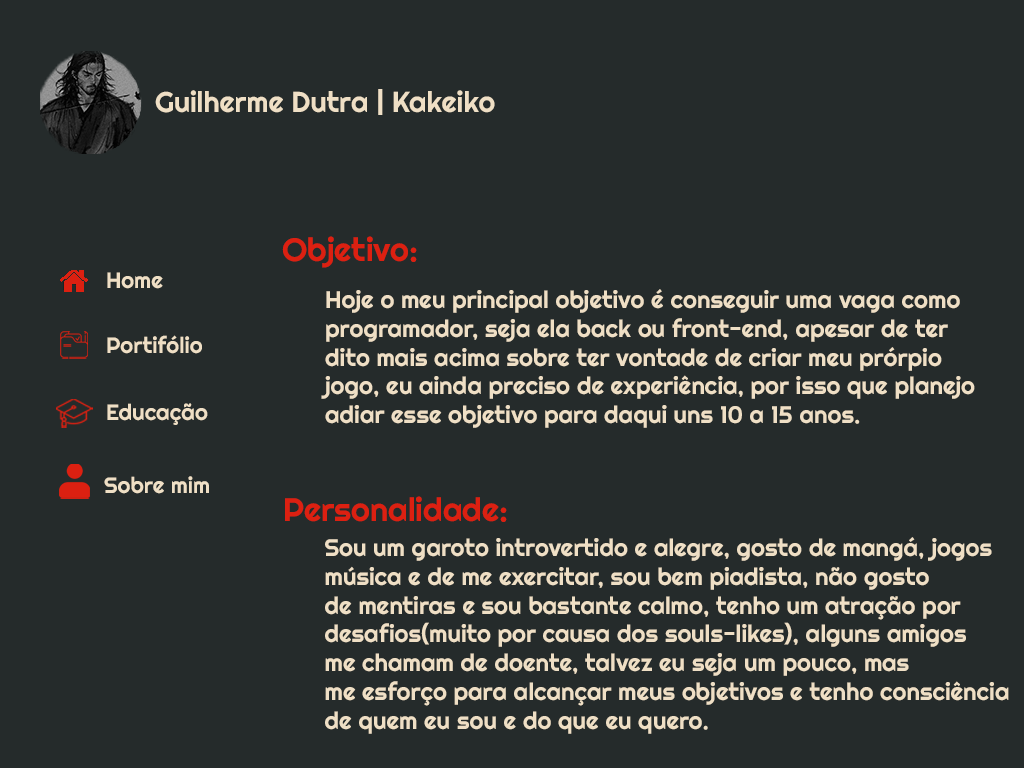
<style>
.page{position:relative;width:1024px;height:768px;background:#252b2b}
.page>*{position:absolute;margin:0}
.t1{font:28.7px "Righteous-Regular";color:#efdfc5}
.t2{font:32.4px "Righteous-Regular";color:#dc2011}
.t3{font:22.3px "Righteous-Regular";color:#efdfc5}
.t4{font:24px "Righteous-Regular";color:#efdfc5}
</style>
<div class="page">
<p class="t1" style="left:155px;top:89px;width:340px;height:26px">Guilherme Dutra | Kakeiko</p>
<p class="t2" style="left:282px;top:236px;width:135px;height:32px">Objetivo:</p>
<p class="t3" style="left:107px;top:272px;width:56px;height:17px">Home</p>
<p class="t4" style="left:321px;top:289px;width:654px;height:139px">Hoje o meu principal objetivo é conseguir uma vaga como<br>programador, seja ela back ou front-end, apesar de ter<br>dito mais acima sobre ter vontade de criar meu prórpio<br>jogo, eu ainda preciso de experiência, por isso que planejo<br>adiar esse objetivo para daqui uns 10 a 15 anos.</p>
<p class="t3" style="left:107px;top:335px;width:95px;height:19px">Portifólio</p>
<p class="t3" style="left:107px;top:403px;width:101px;height:22px">Educação</p>
<p class="t3" style="left:104px;top:476px;width:105px;height:18px">Sobre mim</p>
<p class="t2" style="left:285px;top:496px;width:222px;height:26px">Personalidade:</p>
<p class="t4" style="left:325px;top:537px;width:684px;height:197px">Sou um garoto introvertido e alegre, gosto de mangá, jogos<br>música e de me exercitar, sou bem piadista, não gosto<br>de mentiras e sou bastante calmo, tenho um atração por<br>desafios(muito por causa dos souls-likes), alguns amigos<br>me chamam de doente, talvez eu seja um pouco, mas<br>me esforço para alcançar meus objetivos e tenho consciência<br>de quem eu sou e do que eu quero.</p>
</div>
